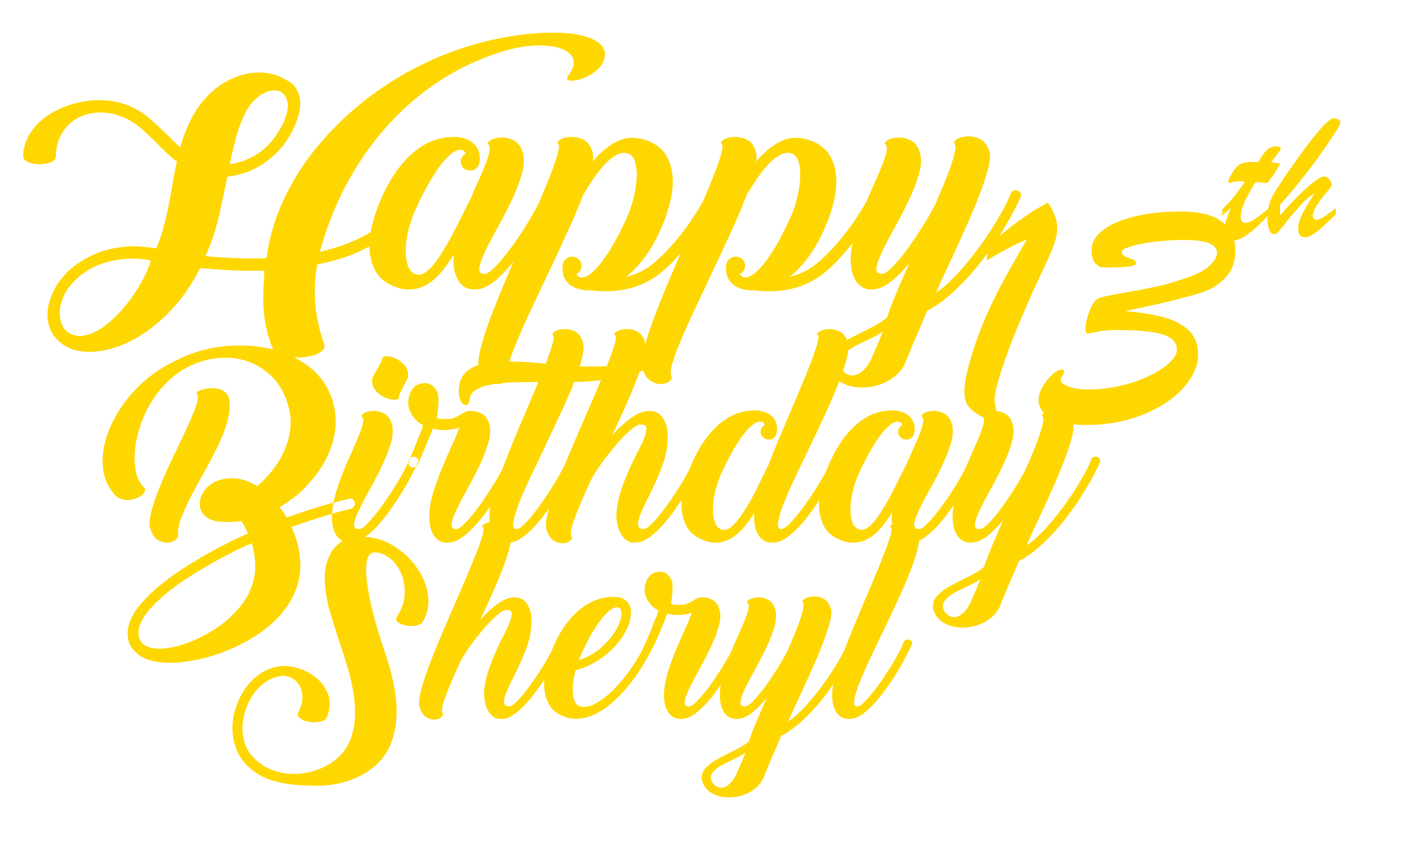
<style>
.page{position:relative;width:1415px;height:843px;background:#ffffff}
.page>*{position:absolute;margin:0}
.t1{font:304.6px "BacktoBlackDemo";color:#ffd700}
.t2{font:182.7px "BrushScriptMT";color:#ffd700}
.t3{font:345.2px "BrushScriptMT";color:#ffd700}
.t4{font:264px "BacktoBlackDemo";color:#ffd700}
.t5{font:243.7px "BacktoBlackDemo";color:#ffd700}
</style>
<div class="page">
<p class="t1" style="left:23px;top:33px;width:998px;height:354px">Happy</p>
<p class="t2" style="left:1222px;top:118px;width:119px;height:122px">th</p>
<p class="t3" style="left:964px;top:202px;width:272px;height:223px">13</p>
<p class="t4" style="left:102px;top:328px;width:998px;height:335px">Birthday</p>
<p class="t5" style="left:232px;top:521px;width:688px;height:276px">Sheryl</p>
</div>
